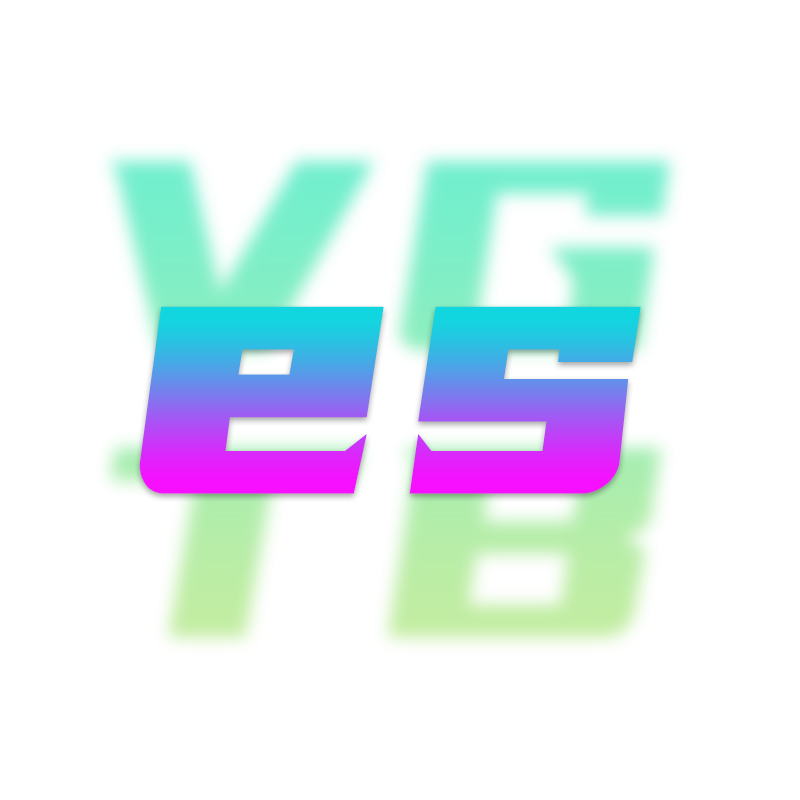
<style>
.page{position:relative;width:800px;height:800px;background:#ffffff}
.page>*{position:absolute;margin:0}
.t1{font:442.1px "YouSheBiaoTiHei";letter-spacing:-0.02em}
</style>
<div class="page">
<p class="t1" style="left:139px;top:306px;width:502px;height:188px">es</p>
</div>
